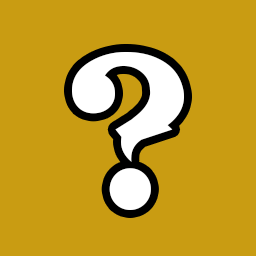
<style>
.page{position:relative;width:256px;height:256px;background:#c99c12}
.page>*{position:absolute;margin:0}
.t1{font:211px "TexasTangoBOLDPERSONALUSE";letter-spacing:0.1em;color:#ffffff}
</style>
<div class="page">
<p class="t1" style="left:72px;top:51px;width:112px;height:159px">?</p>
</div>
